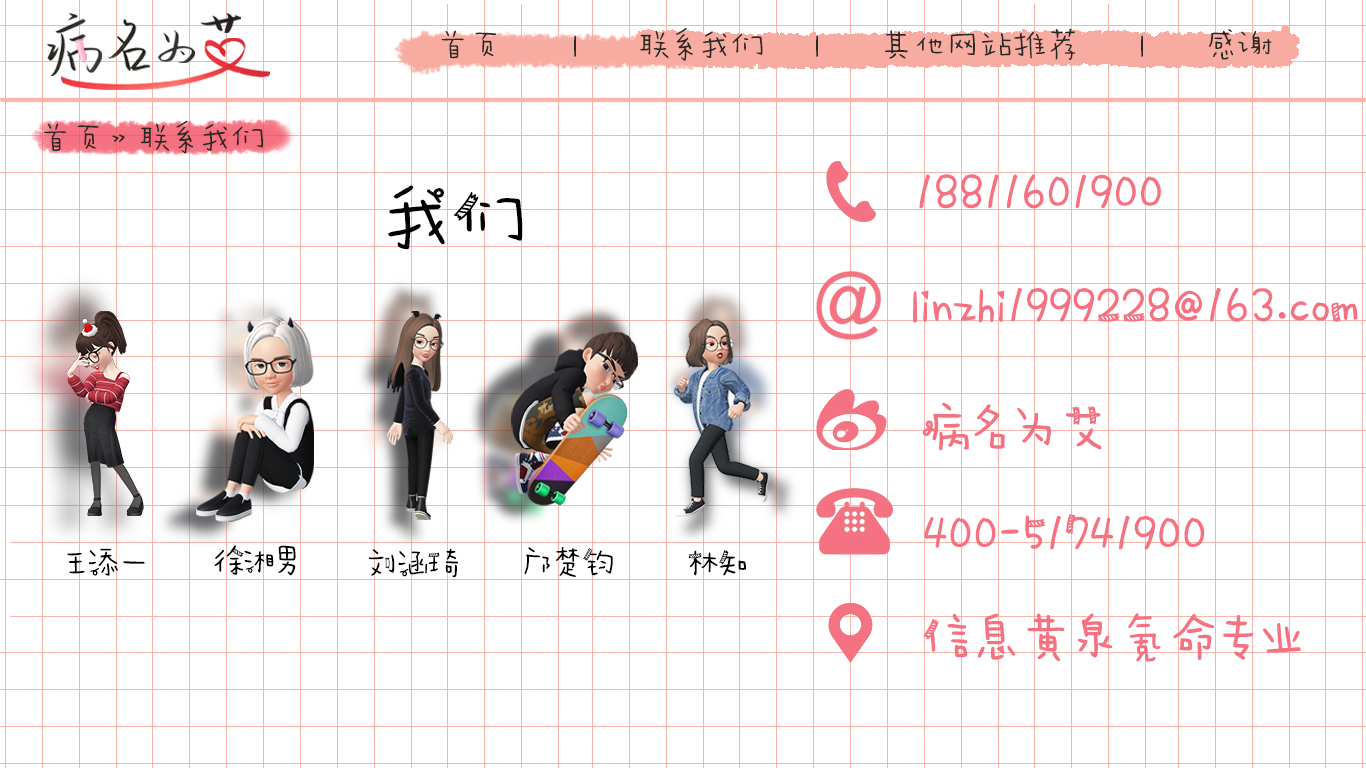
<style>
.page{position:relative;width:1366px;height:768px;background:#ffffff}
.page>*{position:absolute;margin:0}
.t1{font:33.3px "AaWanWan";color:#282a26}
.t2{font:48px "AaPaperTape";color:#f57282;font-weight:bold}
.t3{font:72px "AaPaperTape";color:#000000}
.t4{font:30.6px "AaPaperTape";color:#000000}
</style>
<div class="page">
<p class="t1" style="left:441px;top:27px;width:831px;height:34px">首页       |      联系我们     |      其他网站推荐      |      感谢</p>
<p class="t1" style="left:43px;top:120px;width:220px;height:34px">首页》联系我们</p>
<p class="t2" style="left:919px;top:174px;width:242px;height:35px">18811601900</p>
<p class="t3" style="left:388px;top:185px;width:135px;height:65px">我们</p>
<p class="t2" style="left:913px;top:287px;width:445px;height:36px">linzhi1999228@163.com</p>
<p class="t2" style="left:922px;top:402px;width:180px;height:49px">病名为艾</p>
<p class="t2" style="left:924px;top:514px;width:281px;height:36px">400-51741900</p>
<p class="t4" style="left:214px;top:545px;width:82px;height:31px">徐湘男</p>
<p class="t4" style="left:67px;top:548px;width:78px;height:28px">王添一</p>
<p class="t4" style="left:368px;top:548px;width:90px;height:30px">刘涵琦</p>
<p class="t4" style="left:524px;top:546px;width:89px;height:31px">邝楚钧</p>
<p class="t4" style="left:688px;top:550px;width:59px;height:26px">林知</p>
<p class="t2" style="left:923px;top:613px;width:378px;height:49px">信息黄泉氪命专业</p>
</div>
